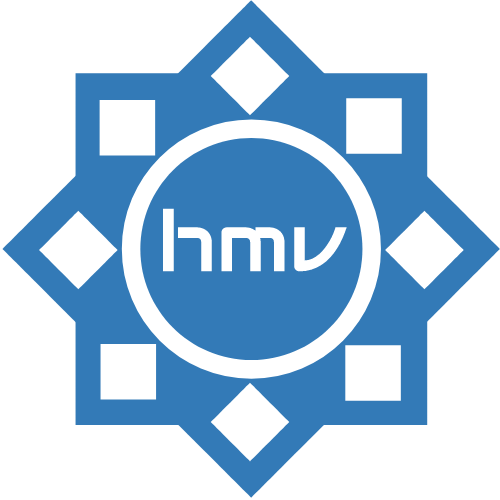
<style>
.page{position:relative;width:500px;height:500px;background:#ffffff}
.page>*{position:absolute;margin:0}
.t1{font:83.3px "Audiowide-Regular";color:#ffffff}
</style>
<div class="page">
<p class="t1" style="left:163px;top:208px;width:184px;height:64px">hmv</p>
</div>
